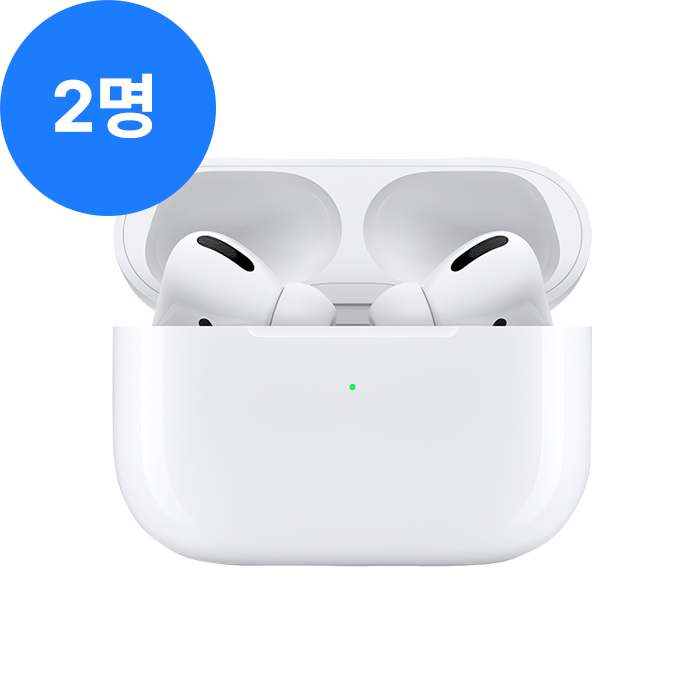
<style>
.page{position:relative;width:683px;height:692px;background:#ffffff}
.page>*{position:absolute;margin:0}
.t1{font:71.4px "Pretendard-Bold";color:#ffffff;font-weight:bold}
</style>
<div class="page">
<p class="t1" style="left:54px;top:73px;width:98px;height:65px">2명</p>
</div>
